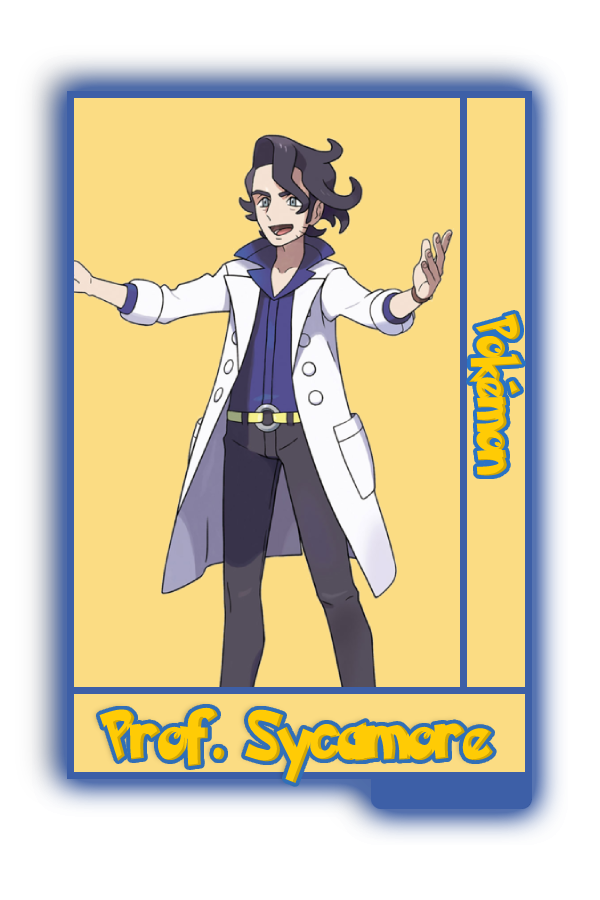
<style>
.page{position:relative;width:600px;height:900px;background:#fbdc83}
.page>*{position:absolute;margin:0}
.t1{font:48.8px "PokemonSolidNormal";color:#ffcb05;scale:0.8 1}
.t2{font:56.6px "PokemonSolidNormal";color:#ffcb05;scale:0.92 1}
</style>
<div class="page">
<p class="t1" style="left:469px;top:313px;width:54px;height:163px;rotate:90deg">Pokémon</p>
<p class="t2" style="left:99px;top:707px;width:394px;height:76px">Prof. Sycamore</p>
</div>
